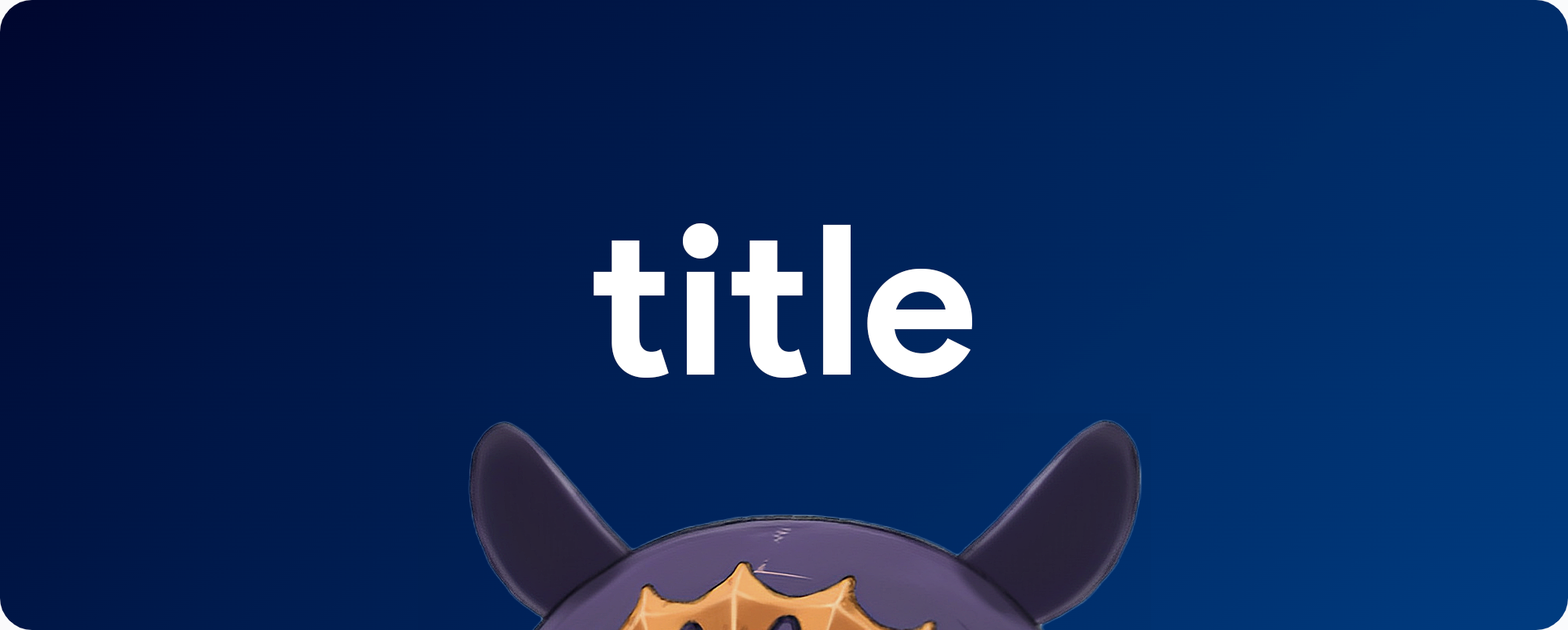
<style>
.page{position:relative;width:1568px;height:630px}
.page>*{position:absolute;margin:0}
.t1{font:209.2px "ProductSans-Bold";color:#ffffff}
</style>
<div class="page">
<p class="t1" style="left:593px;top:223px;width:379px;height:155px">title</p>
</div>
